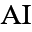
<style>
.page{position:relative;width:32px;height:32px;background:#ffffff}
.page>*{position:absolute;margin:0}
.t1{font:29.2px "TimesNewRomanPSMT";color:#000000}
</style>
<div class="page">
<p class="t1" style="left:0px;top:5px;width:31px;height:19px">AI</p>
</div>
